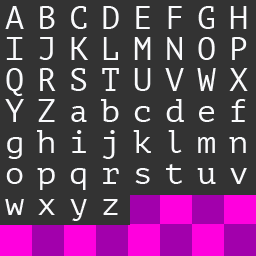
<style>
.page{position:relative;width:256px;height:256px;background:#333333}
.page>*{position:absolute;margin:0}
.t1{font:32px/31px "PTMono-Regular";letter-spacing:0.4em;color:#f9fafc}
</style>
<div class="page">
<p class="t1" style="left:5px;top:6px;width:243px;height:215px">ABCDEFGH<br>IJKLMNOP<br>QRSTUVWX<br>YZabcdef<br>ghijklmn<br>opqrstuv<br>wxyz</p>
</div>
